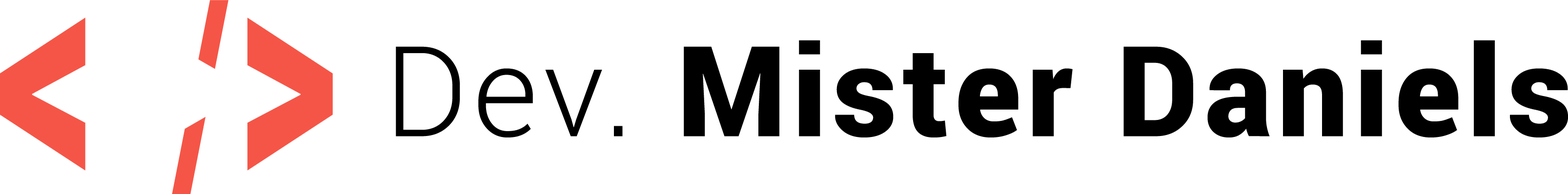
<style>
.page{position:relative;width:1568px;height:194px;background:#ffffff}
.page>*{position:absolute;margin:0}
.t1{font:317.2px "Roboto-Black";letter-spacing:0.047em;color:#f55547;scale:0.62 1}
.t2{font:251.2px "Roboto-Black";letter-spacing:0.047em;color:#f55547;scale:0.62 1}
.t3{font:125.9px "Roboto-Black";letter-spacing:0.047em;color:#000000}
.t4{font:125.9px "Roboto-Light";letter-spacing:0.047em;color:#000000}
</style>
<div class="page">
<p class="t1" style="left:0px;top:0px;width:333px;height:194px">&lt; <span class="t2">/</span>&gt;</p>
<p class="t3" style="left:396px;top:40px;width:1172px;height:98px"><span class="t4">Dev.</span> Mister Daniels</p>
</div>
